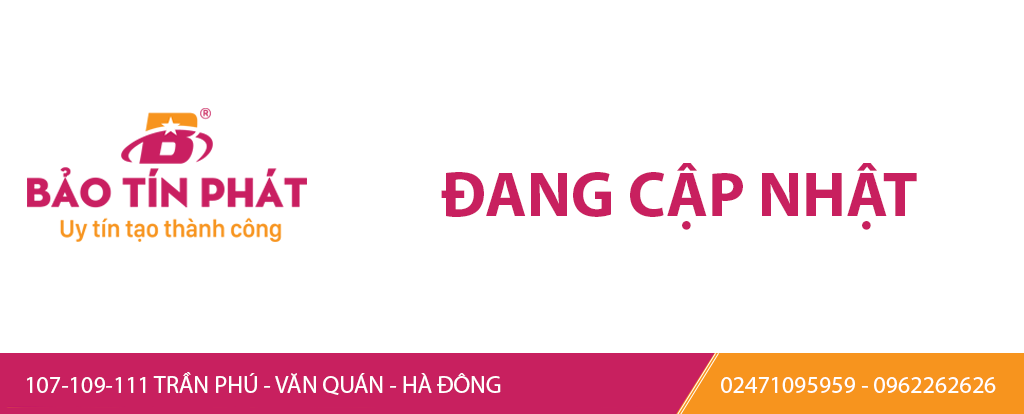
<style>
.page{position:relative;width:1024px;height:414px;background:#ffffff}
.page>*{position:absolute;margin:0}
.t1{font:63.8px "MyriadPro-Bold";color:#c8205f}
.t2{font:24px "MyriadPro-Regular";color:#ffffff}
</style>
<div class="page">
<p class="t1" style="left:441px;top:163px;width:476px;height:67px">ĐANG CẬP NHẬT</p>
<p class="t2" style="left:27px;top:372px;width:474px;height:23px">107-109-111 TRẦN PHÚ - VĂN QUÁN - HÀ ĐÔNG</p>
<p class="t2" style="left:721px;top:377px;width:275px;height:16px">02471095959 - 0962262626</p>
</div>
